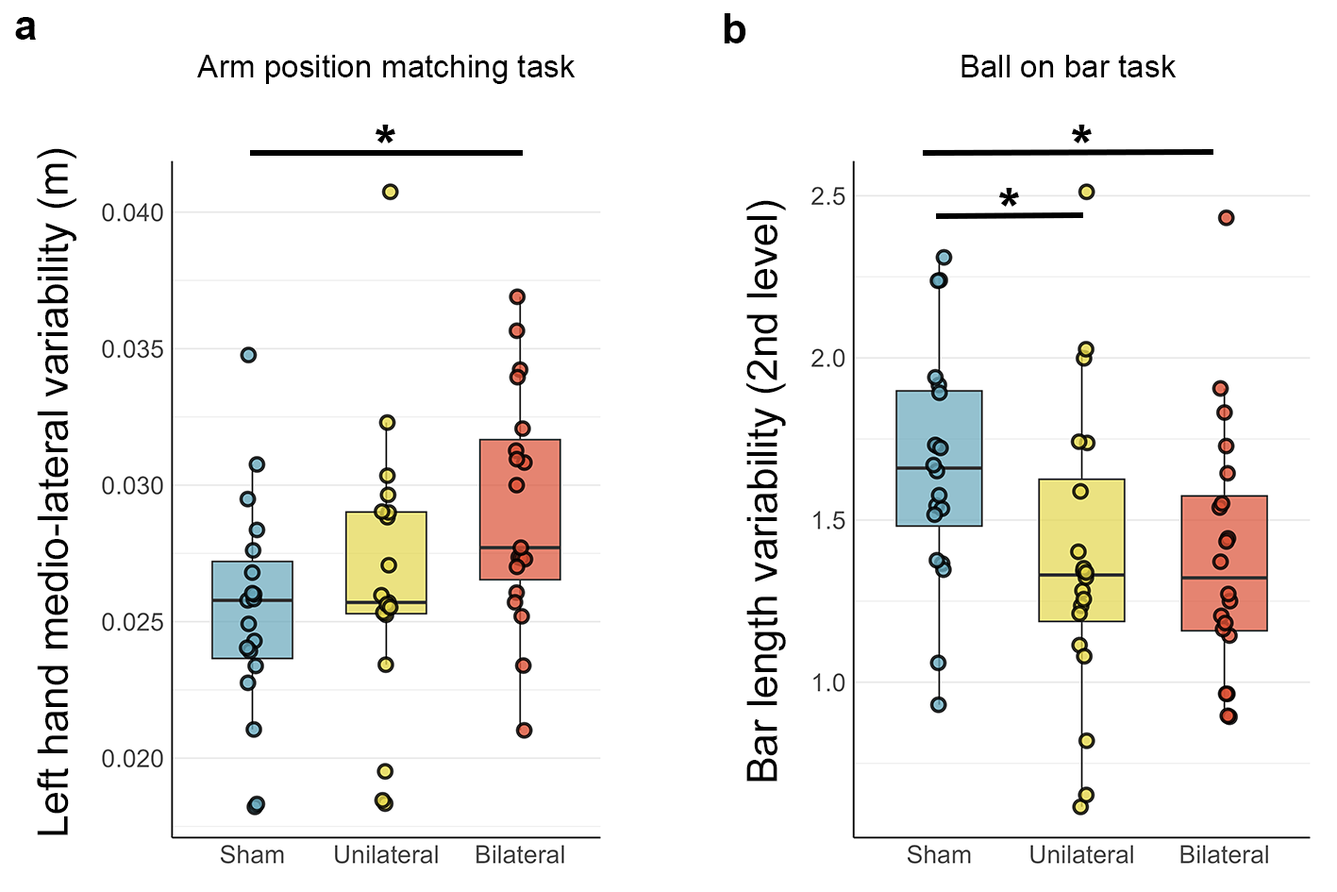
<style>
.page{position:relative;width:1337px;height:892px;background:#ffffff}
.page>*{position:absolute;margin:0}
.t1{font:41.9px "Arial-BoldMT";color:#000000}
.t2{font:31.5px "ArialMT";color:#000000}
.t3{font:52.4px "Arial-Black";color:#000000}
.t4{font:41.9px "ArialMT";color:#000000}
</style>
<div class="page">
<p class="t1" style="left:15px;top:17px;width:21px;height:23px">a</p>
<p class="t1" style="left:724px;top:13px;width:22px;height:30px">b</p>
<p class="t2" style="left:197px;top:55px;width:379px;height:29px">Arm position matching task</p>
<p class="t2" style="left:962px;top:55px;width:215px;height:22px">Ball on bar task</p>
<p class="t3" style="left:375px;top:125px;width:20px;height:18px">*</p>
<p class="t3" style="left:1071px;top:125px;width:21px;height:18px">*</p>
<p class="t4" style="left:37px;top:148px;width:39px;height:687px;rotate:-90deg">Left hand medio-lateral variability (m)</p>
<p class="t3" style="left:998px;top:188px;width:21px;height:19px">*</p>
<p class="t4" style="left:746px;top:200px;width:40px;height:581px;rotate:-90deg">Bar length variability (2nd level)</p>
</div>
